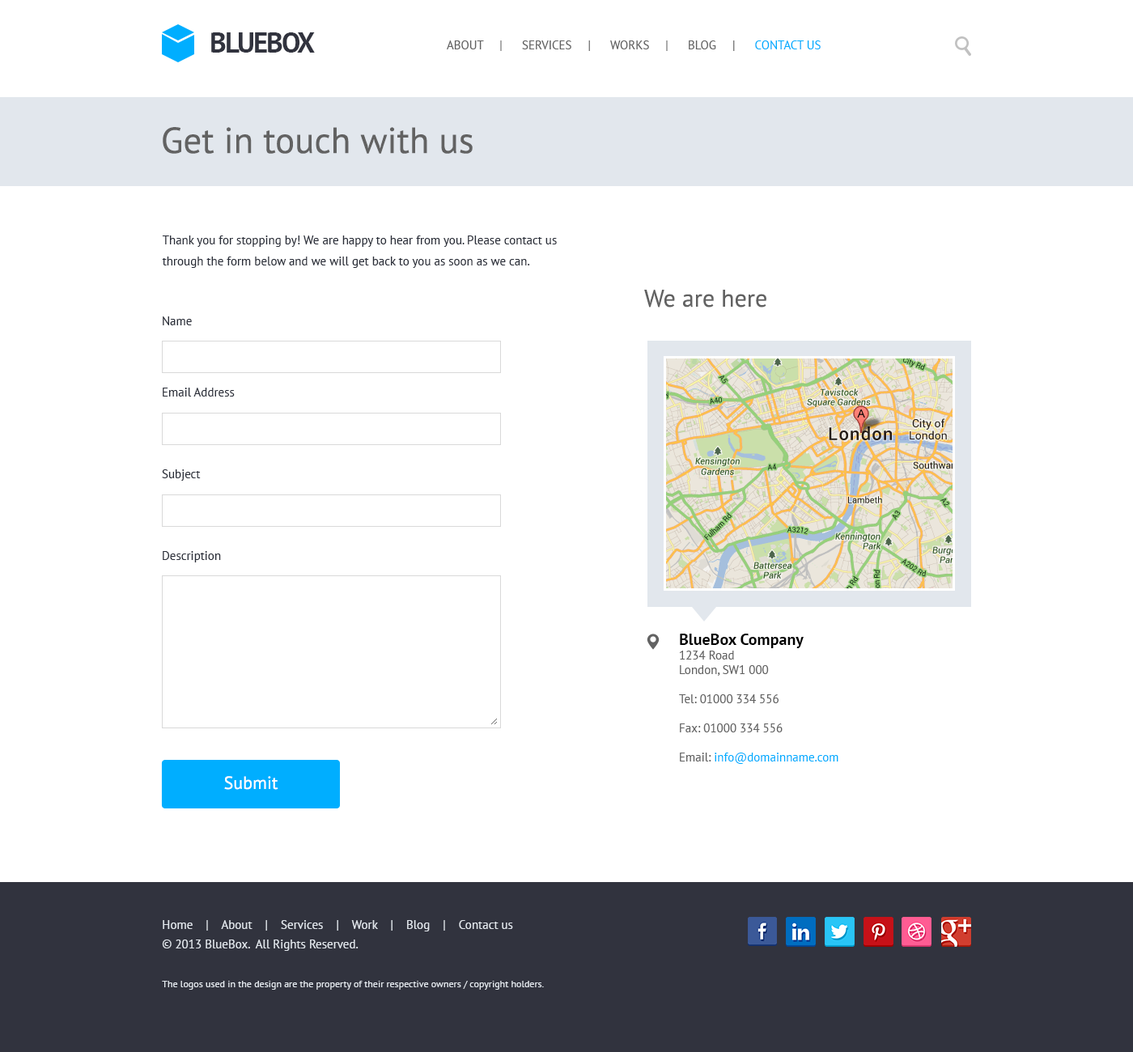
<style>
.page{position:relative;width:1133px;height:1052px;background:#ffffff}
.page>*{position:absolute;margin:0}
.t1{font:28.3px "PTSans-Bold";letter-spacing:-0.06em;color:#31333e}
.t2{font:12.1px "PTSans-Regular";color:#626262;text-transform:uppercase}
.t3{font:12.1px "PTSans-Regular";color:#00aeff;text-transform:uppercase}
.t4{font:36.3px "PTSans-Regular";color:#626262}
.t5{font:12.1px/21px "PTSans-Regular";color:#2a2e39}
.t6{font:24.3px "PTSans-Regular";color:#626262}
.t7{font:12.1px "PTSans-Regular";color:#2a2e39}
.t8{font:12.1px "PTSans-Regular";color:#626262}
.t9{font:16.2px "PTSans-Bold";color:#000000}
.t10{font:12.1px "PTSans-Regular";color:#00aeff}
.t11{font:17.8px "PTSans-Regular";color:#ffffff}
.t12{font:12.1px/19.4px "PTSans-Regular";color:#e2e7ed}
.t13{font:9.7px/19.4px "PTSans-Regular";color:#e2e7ed}
</style>
<div class="page">
<p class="t1" style="left:211px;top:32px;width:104px;height:21px">BLUEBOX</p>
<p class="t2" style="left:447px;top:40px;width:374px;height:11px">About     |      Services     |      Works     |      Blog     |      <span class="t3">Contact Us</span></p>
<p class="t4" style="left:163px;top:127px;width:310px;height:27px">Get in touch with us</p>
<p class="t5" style="left:162px;top:236px;width:395px;height:32px">Thank you for stopping by! We are happy to hear from you. Please contact us through the form below and we will get back to you as soon as we can.</p>
<p class="t6" style="left:644px;top:290px;width:123px;height:18px">We are here</p>
<p class="t7" style="left:163px;top:316px;width:29px;height:9px">Name</p>
<p class="t7" style="left:163px;top:388px;width:72px;height:9px">Email Address</p>
<p class="t7" style="left:162px;top:469px;width:39px;height:12px">Subject</p>
<p class="t7" style="left:163px;top:551px;width:58px;height:12px">Description</p>
<p class="t8" style="left:679px;top:634px;width:160px;height:130px"><span class="t9">BlueBox Company<br></span>1234 Road<br>London, SW1 000<br><br>Tel: 01000 334 556<br><br>Fax: 01000 334 556<br><br>Email: <span class="t10">info@domainname.com</span></p>
<p class="t11" style="left:224px;top:776px;width:54px;height:14px">Submit</p>
<p class="t12" style="left:162px;top:920px;width:382px;height:70px">Home    |    About    |    Services    |    Work    |    Blog    |    Contact us<br>© 2013 BlueBox.  All Rights Reserved.<br><br><span class="t13">The logos used in the design are the property of their respective owners / copyright holders.</span></p>
</div>
